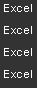
<style>
.page{position:relative;width:37px;height:88px;background:#333333}
.page>*{position:absolute;margin:0}
.t1{font:11px "Gulim";color:#ffffff}
</style>
<div class="page">
<p class="t1" style="left:4px;top:4px;width:28px;height:8px">Excel</p>
<p class="t1" style="left:4px;top:26px;width:28px;height:8px">Excel</p>
<p class="t1" style="left:4px;top:48px;width:28px;height:8px">Excel</p>
<p class="t1" style="left:4px;top:70px;width:28px;height:8px">Excel</p>
</div>
